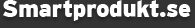
<style>
.page{position:relative;width:195px;height:28px;background:#333333}
.page>*{position:absolute;margin:0}
.t1{font:24.3px "Interstate-Black";letter-spacing:-0.025em;color:#ffffff}
</style>
<div class="page">
<p class="t1" style="left:3px;top:0px;width:188px;height:21px">Smartprodukt.se</p>
</div>
